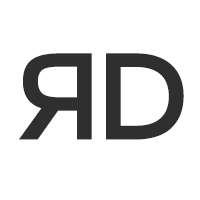
<style>
.page{position:relative;width:200px;height:200px;background:#ffffff}
.page>*{position:absolute;margin:0}
.t1{font:123px "Montserrat-Regular";color:#2f2f2f}
</style>
<div class="page">
<p class="t1" style="left:19px;top:53px;width:73px;height:87px;rotate:180deg">R</p>
<p class="t1" style="left:106px;top:53px;width:78px;height:87px">D</p>
</div>
